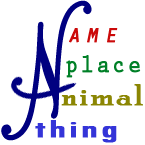
<style>
.page{position:relative;width:145px;height:145px;background:#ffffff}
.page>*{position:absolute;margin:0}
.t1{font:157.4px "PalaceScriptMT";letter-spacing:0.22em;color:#000080;font-weight:bold;scale:0.84 1}
.t2{font:25.8px "OratorStd-Slanted";letter-spacing:0.22em;color:#cb0a0a;font-weight:bold;scale:0.84 1}
.t3{font:25.8px "PrestigeEliteStd-Bd";letter-spacing:0.1em;color:#008027;font-weight:bold;scale:0.84 1}
.t4{font:31px "PoorRichard-Regular";letter-spacing:0.04em;color:#8b8603;font-weight:bold;scale:1.1 1}
.t5{font:25.8px "TwCenMT-Condensed";letter-spacing:0.04em;color:#3434d8;font-weight:bold;scale:1.81 1}
</style>
<div class="page">
<p class="t1" style="left:1px;top:0px;width:91px;height:141px;rotate:-28deg">N</p>
<p class="t2" style="left:69px;top:28px;width:49px;height:15px">ame</p>
<p class="t3" style="left:66px;top:55px;width:75px;height:23px">place</p>
<p class="t4" style="left:61px;top:84px;width:82px;height:22px">nimal</p>
<p class="t5" style="left:35px;top:120px;width:82px;height:23px">thing</p>
</div>
